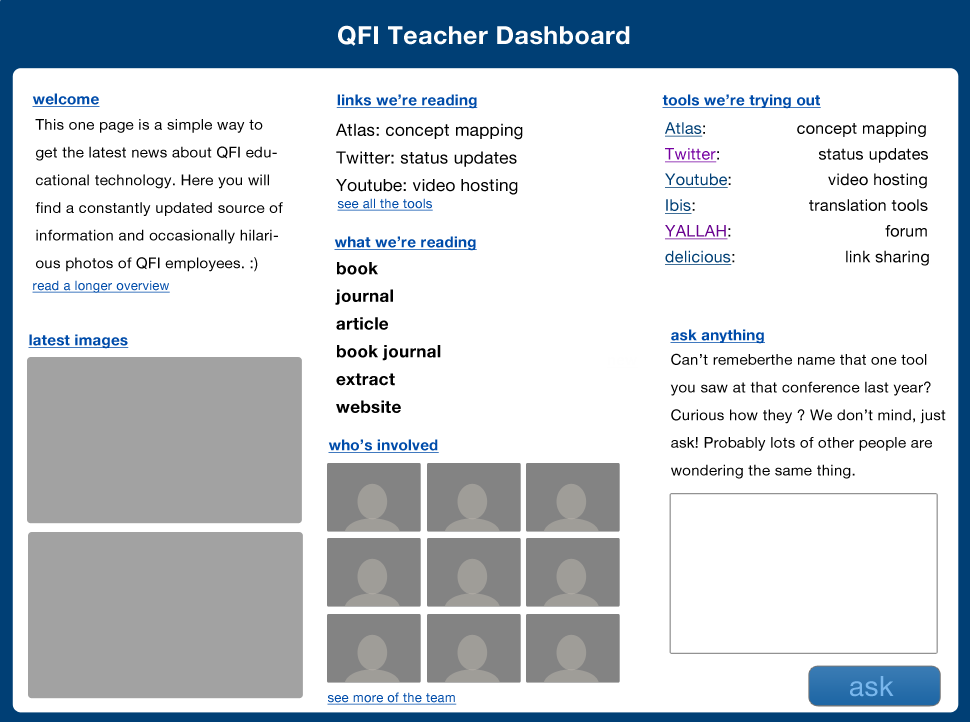
<style>
.page{position:relative;width:970px;height:722px;background:#ffffff}
.page>*{position:absolute;margin:0}
.t1{font:25px "HelveticaNeue-Bold";letter-spacing:0.02em;color:#fefefe}
.t2{font:15px "HelveticaNeue-Bold";letter-spacing:0.02em;color:#004caa;text-decoration:underline}
.t3{font:15px/27.7px "HelveticaNeue";letter-spacing:0.02em;color:#000000}
.t4{font:17px/27.7px "HelveticaNeue";letter-spacing:0.02em;color:#000000}
.t5{font:17px/27.7px "HelveticaNeue-Bold";letter-spacing:0.02em;color:#000000}
.t6{font:16px/25.7px "HelveticaNeue";letter-spacing:0.02em;color:#000000}
.t7{font:16px/21.7px "HelveticaNeue-Bold";letter-spacing:0.02em;color:#000000}
.t8{font:16px/25.7px "HelveticaNeue";letter-spacing:0.02em;color:#003f75;text-decoration:underline}
.t9{font:16px/25.7px "HelveticaNeue";letter-spacing:0.02em;color:#7500a1;text-decoration:underline}
.t10{font:16px/25.7px "HelveticaNeue";letter-spacing:0.02em;color:#690190;text-decoration:underline}
.t11{font:13px "HelveticaNeue";letter-spacing:0.02em;color:#004caa;text-decoration:underline}
.t12{font:15px/39.7px "HelveticaNeue";letter-spacing:0.02em;color:#000000}
.t13{font:28px "HelveticaNeue";letter-spacing:0.02em;color:#79b7ed}
</style>
<div class="page">
<p class="t1" style="left:338px;top:25px;width:292px;height:21px">QFI Teacher Dashboard</p>
<p class="t2" style="left:32px;top:93px;width:68px;height:14px">welcome</p>
<p class="t2" style="left:336px;top:94px;width:142px;height:15px">links we’re reading</p>
<p class="t2" style="left:662px;top:94px;width:159px;height:15px">tools we’re trying out</p>
<p class="t3" style="left:35px;top:119px;width:248px;height:153px">This one page is a simple way to get the latest news about QFI educational technology. Here you will find a constantly updated source of information and occasionally hilarious photos of QFI employees. :)</p>
<p class="t4" style="left:335px;top:123px;width:188px;height:290px"><span class="t5"><br></span>Atlas: concept mapping<br>Twitter: status updates<br>Youtube: video hosting<br><span class="t5"><br><br>book<br>journal<br>article<br>book journal<br>extract<br>website</span></p>
<p class="t6" style="left:665px;top:122px;width:264px;height:144px"><span class="t7"><br></span><span class="t8">Atlas</span>:        concept mapping<br><span class="t9">Twitter</span>:      status updates<br><span class="t8">Youtube</span>:        video hosting<br><span class="t8">Ibis</span>:     translation tools<br><span class="t10">YALLAH</span>:                   forum<br><span class="t8">delicious</span>:    link sharing</p>
<p class="t11" style="left:337px;top:198px;width:96px;height:13px">see all the tools</p>
<p class="t2" style="left:334px;top:236px;width:143px;height:15px">what we’re reading</p>
<p class="t11" style="left:32px;top:280px;width:138px;height:13px">read a longer overview</p>
<p class="t2" style="left:670px;top:329px;width:95px;height:15px">ask anything</p>
<p class="t2" style="left:28px;top:334px;width:101px;height:15px">latest images</p>
<p class="t3" style="left:670px;top:353px;width:276px;height:126px"><span class="t12">Can’t remeberthe name that one tool </span>you saw at that conference last year? Curious how they ? We don’t mind, just ask! Probably lots of other people are wondering the same thing.</p>
<p class="t2" style="left:328px;top:439px;width:111px;height:14px">who’s involved</p>
<p class="t13" style="left:850px;top:676px;width:44px;height:21px">ask</p>
<p class="t11" style="left:327px;top:692px;width:130px;height:13px">see more of the team</p>
</div>
